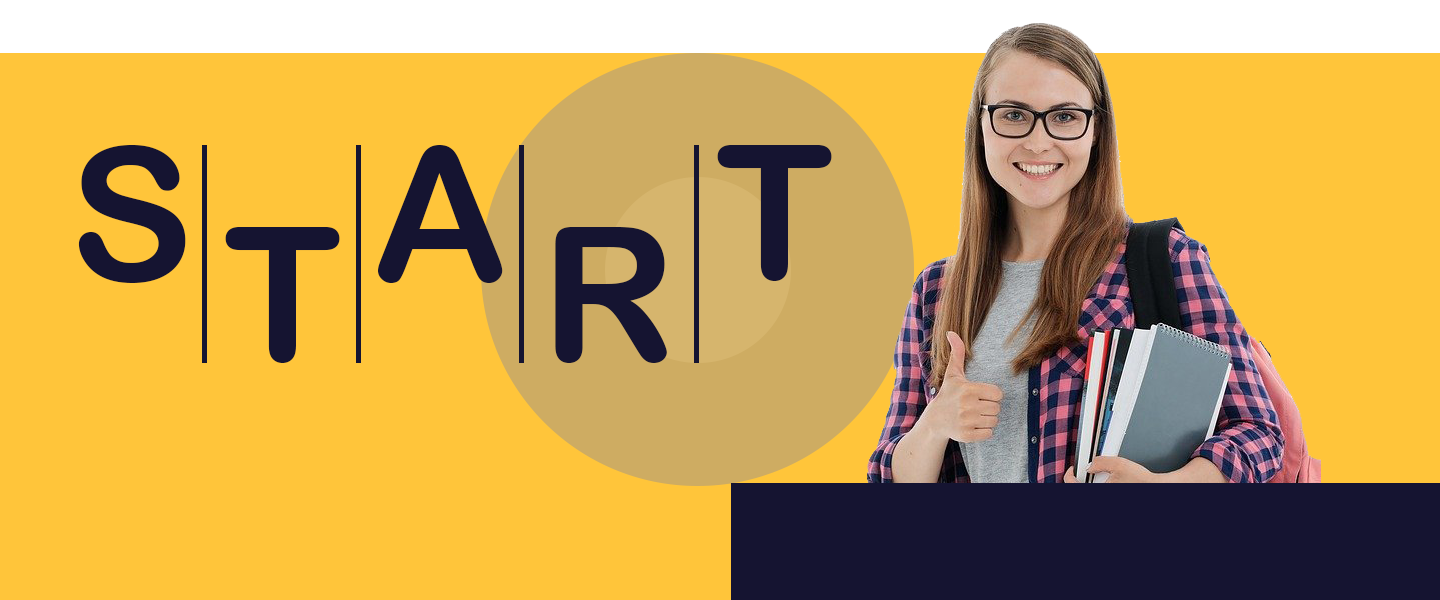
<style>
.page{position:relative;width:1440px;height:600px;background:#ffc53a}
.page>*{position:absolute;margin:0}
.t1{font:187.1px "ArialRoundedMTBold";color:#151431}
</style>
<div class="page">
<p class="t1" style="left:78px;top:145px;width:108px;height:138px">S</p>
<p class="t1" style="left:378px;top:145px;width:125px;height:138px">A</p>
<p class="t1" style="left:717px;top:145px;width:115px;height:136px">T</p>
<p class="t1" style="left:225px;top:227px;width:115px;height:136px">T</p>
<p class="t1" style="left:555px;top:227px;width:112px;height:136px">R</p>
</div>
